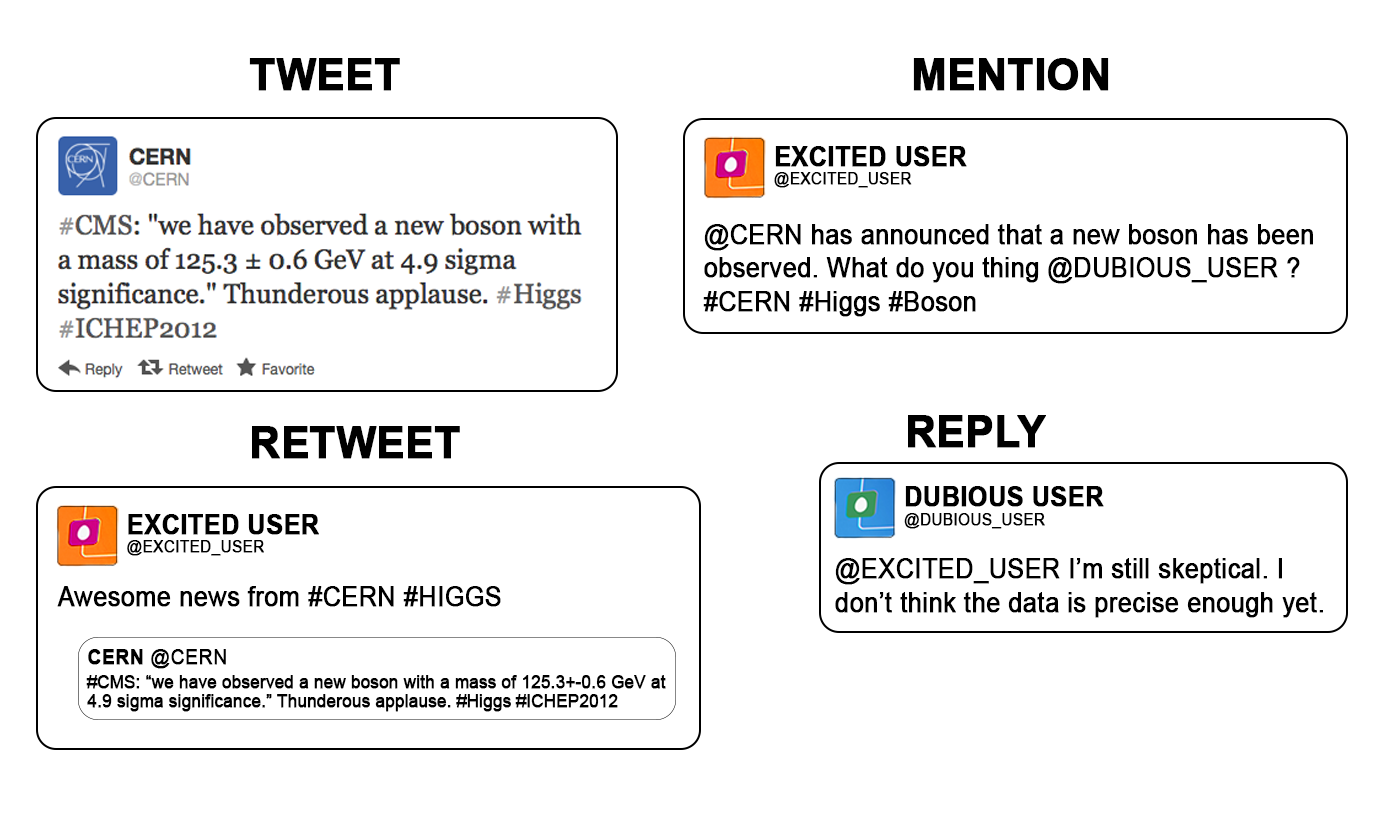
<style>
.page{position:relative;width:1385px;height:825px;background:#ffffff}
.page>*{position:absolute;margin:0}
.t1{font:44.6px "Arial-BoldMT";color:#000000;font-weight:bold;scale:0.93 1}
.t2{font:16.3px/18.4px "ArialMT";color:#000000;font-weight:bold;scale:0.93 1}
.t3{font:26.7px/18.4px "Arial-BoldMT";color:#000000;font-weight:bold;scale:0.93 1}
.t4{font:26.7px/163.2px "ArialMT";color:#000000;font-weight:bold;scale:0.93 1}
.t5{font:26.7px/33.1px "ArialMT";color:#000000;font-weight:bold;scale:0.93 1}
.t6{font:26.7px "ArialMT";color:#000000;font-weight:bold;scale:0.93 1}
.t7{font:17.8px/18.4px "ArialMT";color:#000000;font-weight:bold;scale:0.93 1}
.t8{font:20.8px/24.5px "Arial-BoldMT";color:#000000;font-weight:bold;scale:0.93 1}
.t9{font:20.8px/24.5px "ArialMT";color:#000000;font-weight:bold;scale:0.93 1}
.t10{font:17.8px/24.5px "ArialMT";color:#000000;font-weight:bold;scale:0.93 1}
</style>
<div class="page">
<p class="t1" style="left:249px;top:58px;width:151px;height:33px">TWEET</p>
<p class="t1" style="left:913px;top:58px;width:196px;height:33px">MENTION</p>
<p class="t2" style="left:774px;top:146px;width:193px;height:42px"><span class="t3">EXCITED USER<br></span>@EXCITED_USER<br><br> <br><span class="t4"><br><br>dsa<br>wq</span></p>
<p class="t5" style="left:703px;top:224px;width:610px;height:93px">@CERN has announced that a new boson has been observed. What do you thing @DUBIOUS_USER ? <br>#CERN #Higgs #Boson</p>
<p class="t1" style="left:908px;top:415px;width:138px;height:33px">REPLY</p>
<p class="t1" style="left:252px;top:426px;width:208px;height:33px">RETWEET</p>
<p class="t2" style="left:904px;top:486px;width:200px;height:43px"><span class="t3">DUBIOUS USER<br></span>@DUBIOUS_USER<br><br> <br><span class="t4"><br><br>dsa<br>wq</span></p>
<p class="t2" style="left:127px;top:514px;width:192px;height:42px"><span class="t3">EXCITED USER<br></span>@EXCITED_USER<br><br> <br><span class="t4"><br><br>dsa<br>wq</span></p>
<p class="t5" style="left:835px;top:558px;width:488px;height:60px">@EXCITED_USER I’m still skeptical. I don’t think the data is precise enough yet.</p>
<p class="t6" style="left:57px;top:586px;width:444px;height:21px">Awesome news from #CERN #HIGGS</p>
<p class="t7" style="left:86px;top:649px;width:580px;height:63px"><span class="t8">CERN</span><span class="t9"> @CERN<br></span><span class="t10">#CMS: “we have observed a new boson with a mass of 125.3+-0.6 GeV </span>at 4.9 sigma significance.” Thunderous applause. #Higgs #ICHEP2012</p>
</div>
